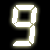
<style>
.page{position:relative;width:50px;height:50px;background:#000000}
.page>*{position:absolute;margin:0}
.t1{font:55px "LiquidCrystal";color:#ffffff}
</style>
<div class="page">
<p class="t1" style="left:12px;top:5px;width:25px;height:41px">9</p>
</div>
